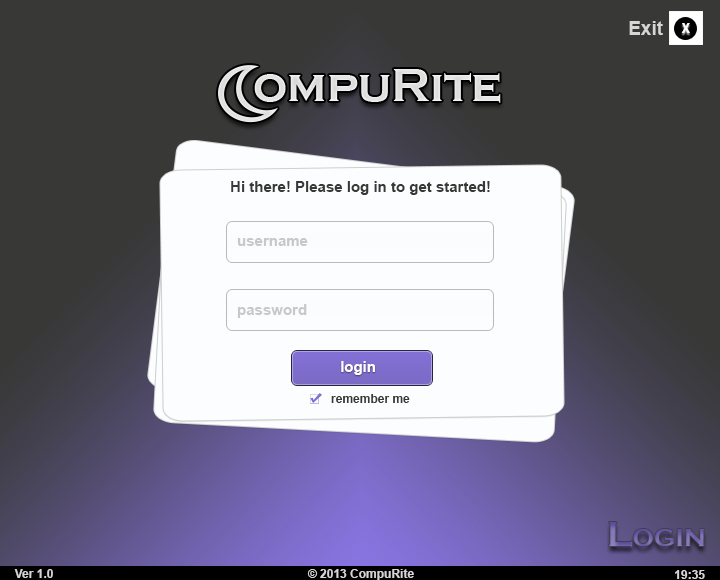
<style>
.page{position:relative;width:720px;height:580px;background:#383837}
.page>*{position:absolute;margin:0}
.t1{font:19px "Arial-BoldMT";color:#d7d5d5}
.t2{font:13.7px "MyriadPro-Bold";color:#fcfcfc}
.t3{font:15px "Arial-BoldMT";color:#383837}
.t4{font:15px "Arial-BoldMT";color:#c8c8c8}
.t5{font:15px "Arial-BoldMT";color:#ffffff}
.t6{font:12px "Arial-BoldMT";color:#383837}
.t7{font:36px "CopperplateGothic-Bold";color:#7164ab;font-variant:small-caps}
.t8{font:12px "Arial-BoldMT";color:#d7d5d5}
</style>
<div class="page">
<p class="t1" style="left:629px;top:21px;width:34px;height:14px">Exit</p>
<p class="t2" style="left:681px;top:23px;width:9px;height:10px">X</p>
<p class="t3" style="left:231px;top:181px;width:259px;height:14px">Hi there! Please log in to get started!</p>
<p class="t4" style="left:237px;top:238px;width:71px;height:8px">username</p>
<p class="t4" style="left:237px;top:304px;width:70px;height:14px">password</p>
<p class="t5" style="left:341px;top:361px;width:34px;height:14px">login</p>
<p class="t6" style="left:331px;top:394px;width:79px;height:9px">remember me</p>
<p class="t7" style="left:609px;top:522px;width:96px;height:25px">Login</p>
<p class="t8" style="left:14px;top:569px;width:39px;height:9px">Ver 1.0</p>
<p class="t8" style="left:307px;top:569px;width:107px;height:11px">© 2013 CompuRite</p>
<p class="t8" style="left:675px;top:570px;width:30px;height:9px">19:35</p>
</div>
